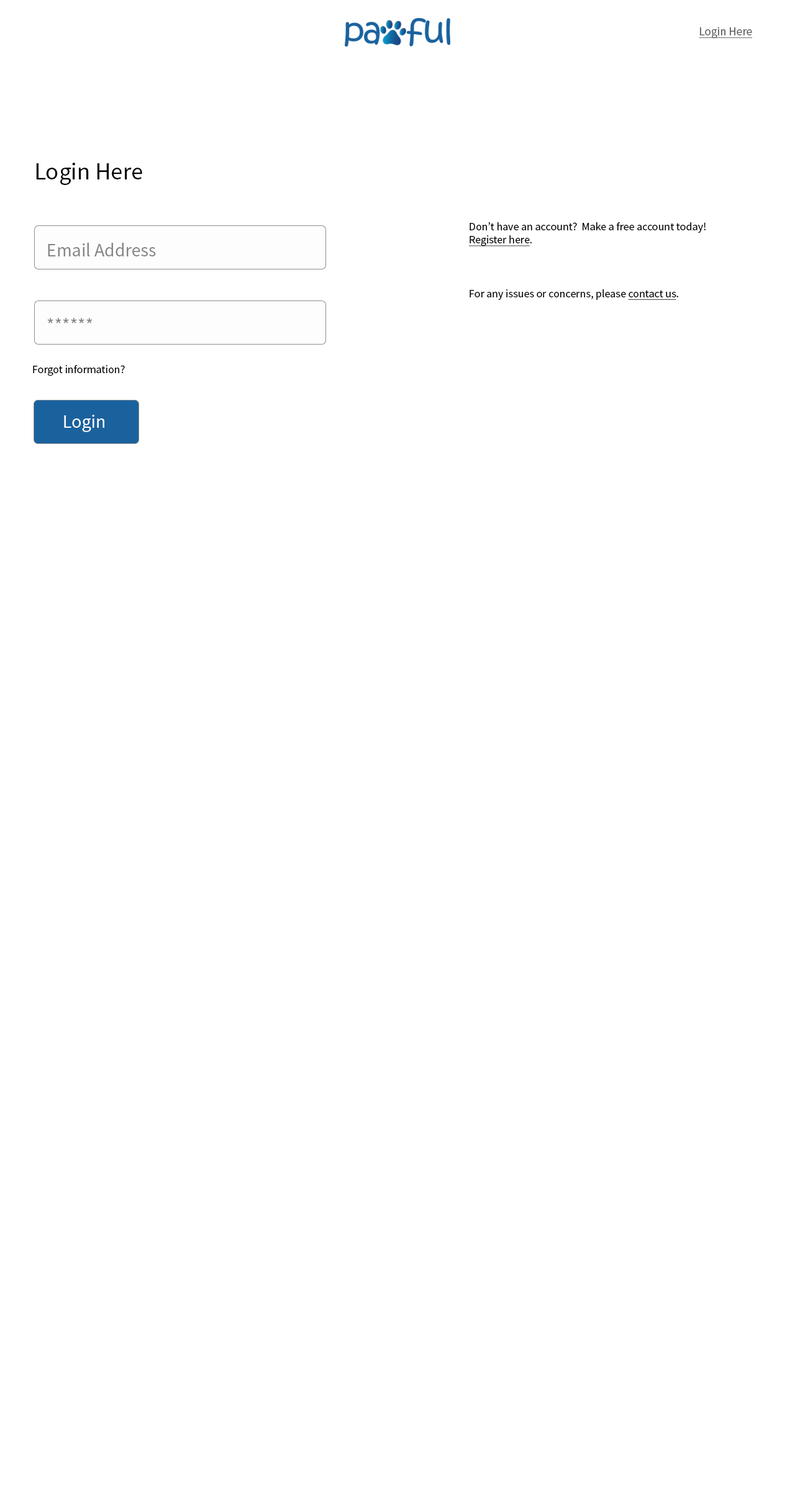
<style>
.page{position:relative;width:795px;height:1500px;background:#ffffff}
.page>*{position:absolute;margin:0}
.t1{font:11.8px "SourceSansPro-Regular";color:#636363;text-decoration:underline}
.t2{font:24.2px "SourceSansPro-Regular";color:#000000}
.t3{font:11.2px "SourceSansPro-Regular";color:#000000}
.t4{font:11.2px "SourceSansPro-Regular";color:#000000;text-decoration:underline}
.t5{font:18.6px "SourceSansPro-Regular";color:#878686}
.t6{font:18.6px "SourceSansPro-Regular";color:#ffffff}
</style>
<div class="page">
<p class="t1" style="left:699px;top:27px;width:54px;height:11px">Login Here</p>
<p class="t2" style="left:36px;top:163px;width:106px;height:22px">Login Here</p>
<p class="t3" style="left:469px;top:222px;width:236px;height:78px">Don’t have an account?  Make a free account today!<br><span class="t4">Register here</span>.<br><br><br><br>For any issues or concerns, please <span class="t4">contact us</span>.</p>
<p class="t5" style="left:48px;top:243px;width:108px;height:13px">Email Address</p>
<p class="t5" style="left:47px;top:318px;width:46px;height:6px">******</p>
<p class="t3" style="left:33px;top:365px;width:92px;height:11px">Forgot information?</p>
<p class="t6" style="left:64px;top:415px;width:40px;height:17px">Login</p>
</div>
